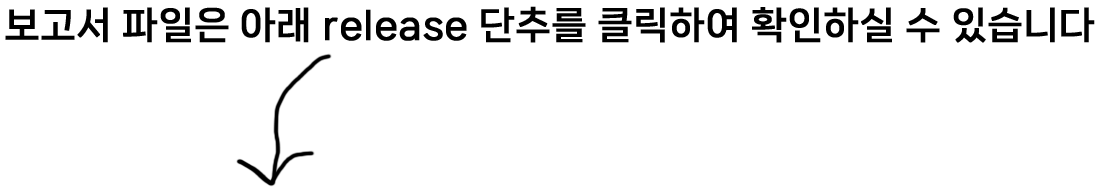
<style>
.page{position:relative;width:1102px;height:193px;background:#ffffff}
.page>*{position:absolute;margin:0}
.t1{font:36.9px "NanumSquareNeoTTF-cBd";color:#000000;font-weight:bold}
</style>
<div class="page">
<p class="t1" style="left:5px;top:6px;width:1090px;height:37px">보고서 파일은 아래 release 단추를 클릭하여 확인하실 수 있습니다</p>
</div>
